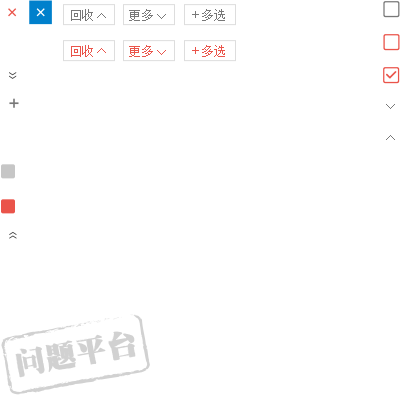
<style>
.page{position:relative;width:400px;height:400px;background:#ffffff}
.page>*{position:absolute;margin:0}
.t1{font:12px "SimSun";letter-spacing:0.01em;color:#787878}
.t2{font:12px "STFangsong";letter-spacing:0.01em;color:#787878}
.t3{font:12px "SimSun";letter-spacing:0.01em;color:#ea544a}
</style>
<div class="page">
<p class="t1" style="left:71px;top:9px;width:22px;height:12px">回收</p>
<p class="t1" style="left:97px;top:13px;width:9px;height:5px">&gt;</p>
<p class="t1" style="left:129px;top:9px;width:24px;height:12px">更多</p>
<p class="t1" style="left:157px;top:14px;width:9px;height:5px">&gt;</p>
<p class="t2" style="left:202px;top:9px;width:23px;height:12px">多选</p>
<p class="t3" style="left:71px;top:45px;width:22px;height:12px">回收</p>
<p class="t3" style="left:97px;top:48px;width:9px;height:5px">&gt;</p>
<p class="t3" style="left:129px;top:45px;width:24px;height:12px">更多</p>
<p class="t3" style="left:157px;top:50px;width:9px;height:5px">&gt;</p>
<p class="t3" style="left:202px;top:45px;width:23px;height:12px">多选</p>
<p class="t1" style="left:386px;top:104px;width:9px;height:5px">&gt;</p>
<p class="t1" style="left:386px;top:135px;width:9px;height:5px">&gt;</p>
</div>
